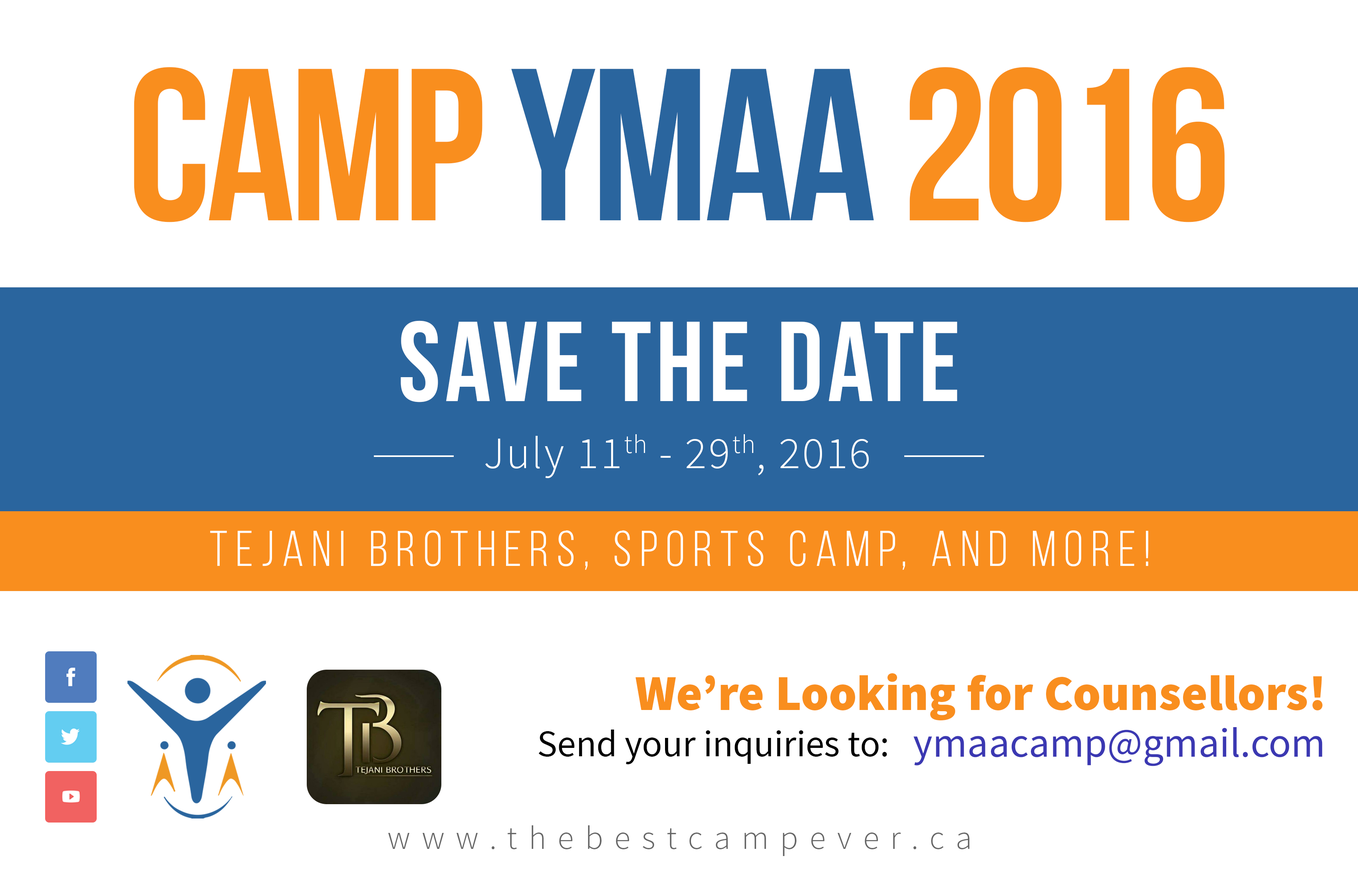
<style>
.page{position:relative;width:1358px;height:878px;background:#ffffff}
.page>*{position:absolute;margin:0}
.t1{font:216.3px "BebasNeueBold";letter-spacing:-0.02em;color:#f98e1e}
.t2{font:216.3px "BebasNeueBold";letter-spacing:-0.02em;color:#2a659e}
.t3{font:113.4px "BebasNeueBold";letter-spacing:0.04em;color:#ffffff}
.t4{font:45.3px "SourceSansPro-Light";letter-spacing:0.04em;color:#ffffff}
.t5{font:49.9px "BebasNeueBook";letter-spacing:0.16em;color:#ffffff}
.t6{font:50px "SourceSansPro-Black";color:#f98e1e}
.t7{font:37.5px "SourceSansPro-Regular";color:#000000}
.t8{font:41.7px "SourceSansPro-Regular";color:#3b38b2}
.t9{font:33.3px "SourceSansPro-Light";letter-spacing:0.34em;color:#676565}
</style>
<div class="page">
<p class="t1" style="left:134px;top:67px;width:1090px;height:155px">CAMP <span class="t2">YMAA </span>2016</p>
<p class="t3" style="left:400px;top:321px;width:557px;height:81px">Save The Date</p>
<p class="t4" style="left:485px;top:434px;width:383px;height:44px">July 11th - 29th, 2016</p>
<p class="t5" style="left:210px;top:531px;width:938px;height:39px">Tejani Brothers, Sports Camp, And More!</p>
<p class="t6" style="left:635px;top:674px;width:687px;height:47px">We’re Looking for Counsellors!</p>
<p class="t7" style="left:538px;top:730px;width:349px;height:35px">Send your inquiries to:</p>
<p class="t8" style="left:913px;top:727px;width:409px;height:40px">ymaacamp@gmail.com</p>
<p class="t9" style="left:388px;top:826px;width:581px;height:30px">www.thebestcampever.ca</p>
</div>
